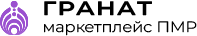
<style>
.page{position:relative;width:197px;height:36px;background:#ffffff}
.page>*{position:absolute;margin:0}
.t1{font:19.3px "MontserratRoman-SemiBold";letter-spacing:0.05em;color:#000000;font-weight:bold;scale:1.26 1}
.t2{font:14.9px "MontserratRoman-Light";color:#000000;font-weight:bold;scale:1.09 1}
</style>
<div class="page">
<p class="t1" style="left:44px;top:1px;width:108px;height:15px">ГРАНАТ</p>
<p class="t2" style="left:44px;top:21px;width:153px;height:15px">маркетплейс ПМР</p>
</div>
